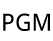
<style>
.page{position:relative;width:53px;height:41px;background:#ffffff}
.page>*{position:absolute;margin:0}
.t1{font:23.7px "DroidSans";color:#000000}
</style>
<div class="page">
<p class="t1" style="left:3px;top:13px;width:47px;height:18px">PGM</p>
</div>
